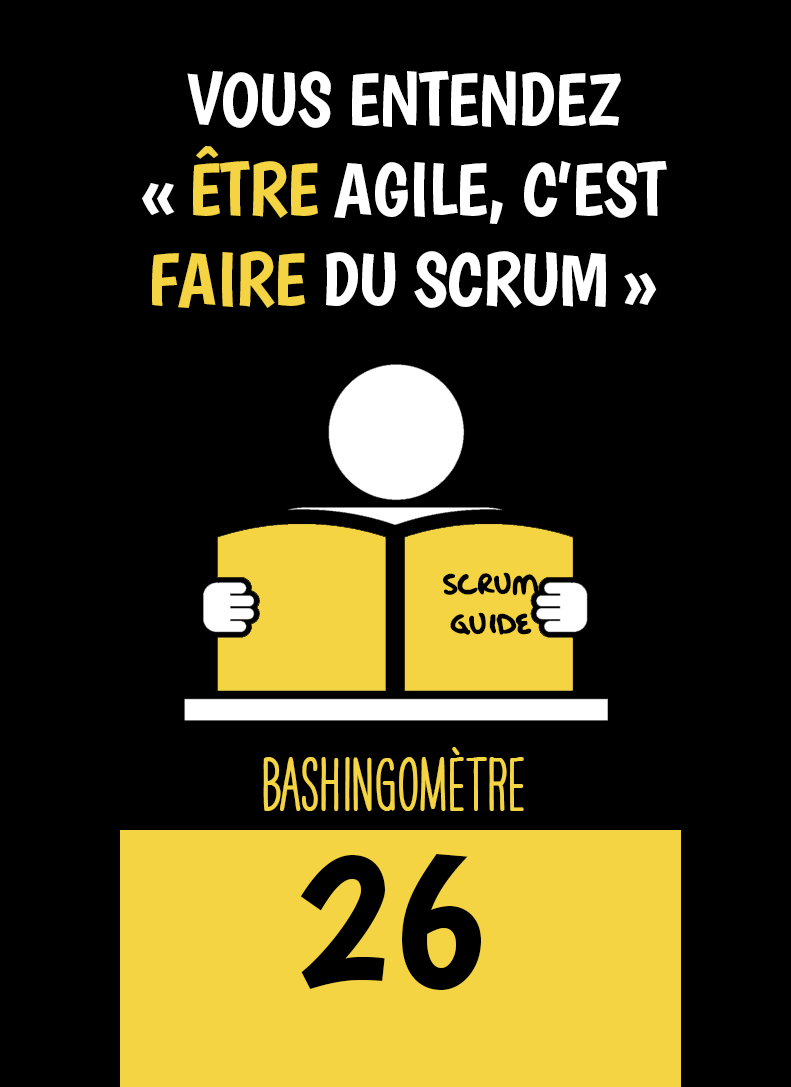
<style>
.page{position:relative;width:791px;height:1087px;background:#000000}
.page>*{position:absolute;margin:0}
.t1{font:75px "Boogaloo-Regular";letter-spacing:-0.02em;color:#ffffff}
.t2{font:75px "Boogaloo-Regular";letter-spacing:-0.04em;color:#ffffff}
.t3{font:75px "Boogaloo-Regular";letter-spacing:-0.02em;color:#f4d443}
.t4{font:33.3px "OakStreetW01-Regular";color:#000000}
.t5{font:66.7px "HAVEANICEDAYTallW04-Bold";color:#f4d443}
.t6{font:200px "Boogaloo-Regular";color:#000000}
</style>
<div class="page">
<p class="t1" style="left:142px;top:71px;width:525px;height:237px;text-align:center">VOUS ENTENDEZ <br><span class="t2">« </span><span class="t3">ÊTRE </span>AGILE, C’EST <span class="t3">FAIRE </span>DU SCRUM »</p>
<p class="t4" style="left:443px;top:572px;width:96px;height:63px;text-align:center">SCRUM<br>GUIDE</p>
<p class="t5" style="left:263px;top:747px;width:261px;height:64px">BASHINgomètre</p>
<p class="t6" style="left:300px;top:854px;width:181px;height:136px">26</p>
</div>
